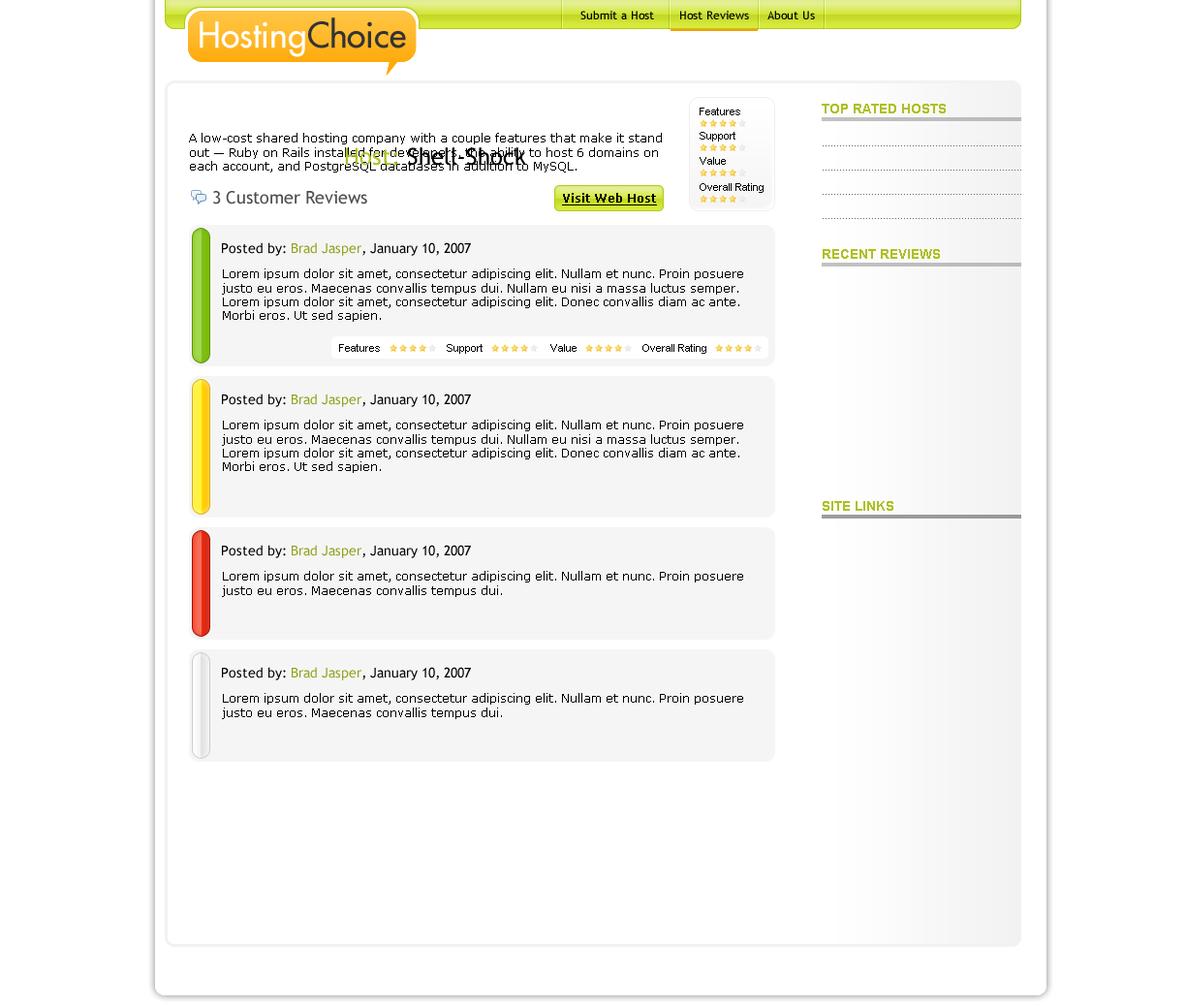
<style>
.page{position:relative;width:1186px;height:1006px;background:#ffffff}
.page>*{position:absolute;margin:0}
.t1{font:34.2px "Futura-Medium";color:#ffffff}
.t2{font:34.2px "Futura-Medium";color:#333333}
.t3{font:11.6px "TrebuchetMS";color:#000000}
.t4{font:10.7px "ArialMT";color:#000000}
.t5{font:13.6px "Arial-BoldMT";color:#aec023;text-transform:uppercase}
.t6{font:11.6px "Verdana";color:#000000}
.t7{font:23.3px "TrebuchetMS";color:#000000}
.t8{font:23.3px "TrebuchetMS";color:#aec023}
.t9{font:17.4px "TrebuchetMS";color:#4d4d4d}
.t10{font:11.6px "Verdana-Bold";color:#000000;text-decoration:underline}
.t11{font:13.6px "TrebuchetMS";color:#000000}
.t12{font:13.6px "TrebuchetMS";color:#92a11d}
</style>
<div class="page">
<p class="t1" style="left:200px;top:17px;width:206px;height:40px">Hosting<span class="t2">Choice</span></p>
<p class="t3" style="left:580px;top:11px;width:74px;height:8px">Submit a Host</p>
<p class="t3" style="left:680px;top:11px;width:69px;height:8px">Host Reviews</p>
<p class="t3" style="left:767px;top:11px;width:48px;height:8px">About Us</p>
<p class="t4" style="left:699px;top:108px;width:41px;height:7px">Features</p>
<p class="t5" style="left:822px;top:104px;width:124px;height:9px">top rated hosts</p>
<p class="t6" style="left:189px;top:133px;width:473px;height:39px">A low-cost shared hosting company with a couple features that make it stand out — Ruby on Rails installed for developers, the ability to host 6 domains on each account, and PostgreSQL databases in addition to MySQL.</p>
<p class="t4" style="left:699px;top:132px;width:36px;height:9px">Support</p>
<p class="t7" style="left:345px;top:147px;width:181px;height:19px"><span class="t8">Host:</span> Shell-Shock</p>
<p class="t4" style="left:699px;top:157px;width:27px;height:8px">Value</p>
<p class="t4" style="left:699px;top:183px;width:64px;height:10px">Overall Rating</p>
<p class="t9" style="left:213px;top:191px;width:154px;height:13px">3 Customer Reviews</p>
<p class="t10" style="left:562px;top:193px;width:95px;height:12px">Visit Web Host</p>
<p class="t11" style="left:222px;top:242px;width:249px;height:14px">Posted by: <span class="t12">Brad Jasper</span>, January 10, 2007</p>
<p class="t5" style="left:822px;top:249px;width:118px;height:10px">recent reviews</p>
<p class="t6" style="left:222px;top:268px;width:521px;height:54px">Lorem ipsum dolor sit amet, consectetur adipiscing elit. Nullam et nunc. Proin posuere justo eu eros. Maecenas convallis tempus dui. Nullam eu nisi a massa luctus semper. Lorem ipsum dolor sit amet, consectetur adipiscing elit. Donec convallis diam ac ante. Morbi eros. Ut sed sapien.</p>
<p class="t4" style="left:339px;top:344px;width:41px;height:8px">Features</p>
<p class="t4" style="left:447px;top:344px;width:35px;height:10px">Support</p>
<p class="t4" style="left:550px;top:344px;width:26px;height:8px">Value</p>
<p class="t4" style="left:642px;top:344px;width:64px;height:10px">Overall Rating</p>
<p class="t11" style="left:222px;top:393px;width:249px;height:14px">Posted by: <span class="t12">Brad Jasper</span>, January 10, 2007</p>
<p class="t6" style="left:222px;top:419px;width:521px;height:54px">Lorem ipsum dolor sit amet, consectetur adipiscing elit. Nullam et nunc. Proin posuere justo eu eros. Maecenas convallis tempus dui. Nullam eu nisi a massa luctus semper. Lorem ipsum dolor sit amet, consectetur adipiscing elit. Donec convallis diam ac ante. Morbi eros. Ut sed sapien.</p>
<p class="t5" style="left:822px;top:501px;width:71px;height:10px">site links</p>
<p class="t11" style="left:222px;top:544px;width:249px;height:14px">Posted by: <span class="t12">Brad Jasper</span>, January 10, 2007</p>
<p class="t6" style="left:222px;top:571px;width:521px;height:26px">Lorem ipsum dolor sit amet, consectetur adipiscing elit. Nullam et nunc. Proin posuere justo eu eros. Maecenas convallis tempus dui.</p>
<p class="t11" style="left:222px;top:667px;width:249px;height:13px">Posted by: <span class="t12">Brad Jasper</span>, January 10, 2007</p>
<p class="t6" style="left:222px;top:693px;width:521px;height:26px">Lorem ipsum dolor sit amet, consectetur adipiscing elit. Nullam et nunc. Proin posuere justo eu eros. Maecenas convallis tempus dui.</p>
</div>
